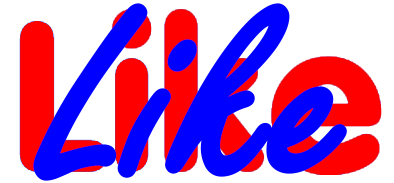
<style>
.page{position:relative;width:394px;height:183px;background:#ffffff}
.page>*{position:absolute;margin:0}
.t1{font:266.6px "FreestyleScript-Regular";color:#0000ff;font-weight:bold}
</style>
<div class="page">
<p class="t1" style="left:33px;top:3px;width:314px;height:178px">Like</p>
</div>
